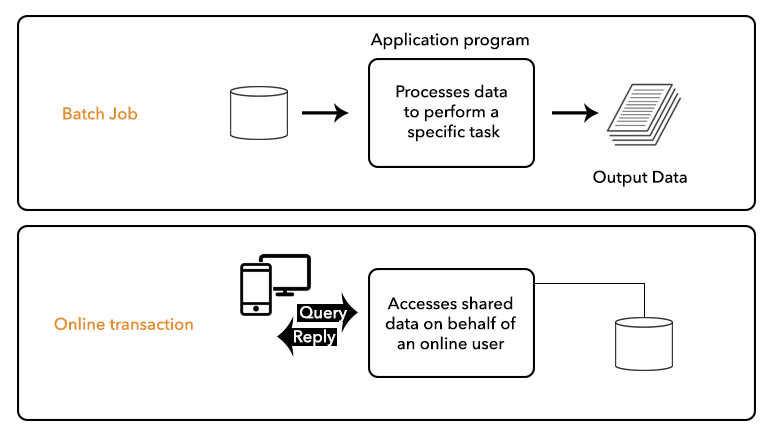
<style>
.page{position:relative;width:773px;height:437px;background:#ffffff}
.page>*{position:absolute;margin:0}
.t1{font:16.7px "AvenirNext-Medium";color:#000000}
.t2{font:16.7px "AvenirNext-Medium";color:#e28e2b}
.t3{font:16.7px "AvenirNext-Medium";color:#ffffff}
</style>
<div class="page">
<p class="t1" style="left:370px;top:32px;width:159px;height:18px">Application program</p>
<p class="t1" style="left:396px;top:84px;width:111px;height:58px;text-align:center">Processes data <br>to perform a <br>specific task</p>
<p class="t2" style="left:63px;top:106px;width:75px;height:14px">Batch Job</p>
<p class="t1" style="left:593px;top:170px;width:94px;height:17px">Output Data</p>
<p class="t1" style="left:385px;top:296px;width:132px;height:54px;text-align:center">Accesses shared<br>data on behalf of<br>an online user</p>
<p class="t2" style="left:54px;top:317px;width:139px;height:14px">Online transaction</p>
<p class="t3" style="left:300px;top:306px;width:47px;height:17px">Query</p>
<p class="t3" style="left:294px;top:329px;width:42px;height:18px">Reply</p>
</div>
